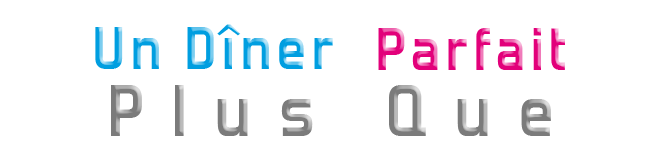
<style>
.page{position:relative;width:666px;height:162px;background:#ffffff}
.page>*{position:absolute;margin:0}
.t1{font:60px "ForgottenFuturistRg-Bold";letter-spacing:0.1em}
.t2{font:72px "ForgottenFuturistRg-Bold";letter-spacing:0.4em;color:#7c7c7c}
</style>
<div class="page">
<p class="t1" style="left:95px;top:24px;width:238px;height:45px">Un Dîner</p>
<p class="t1" style="left:378px;top:28px;width:187px;height:42px">Parfait</p>
<p class="t2" style="left:111px;top:85px;width:440px;height:51px">Plus Que</p>
</div>
